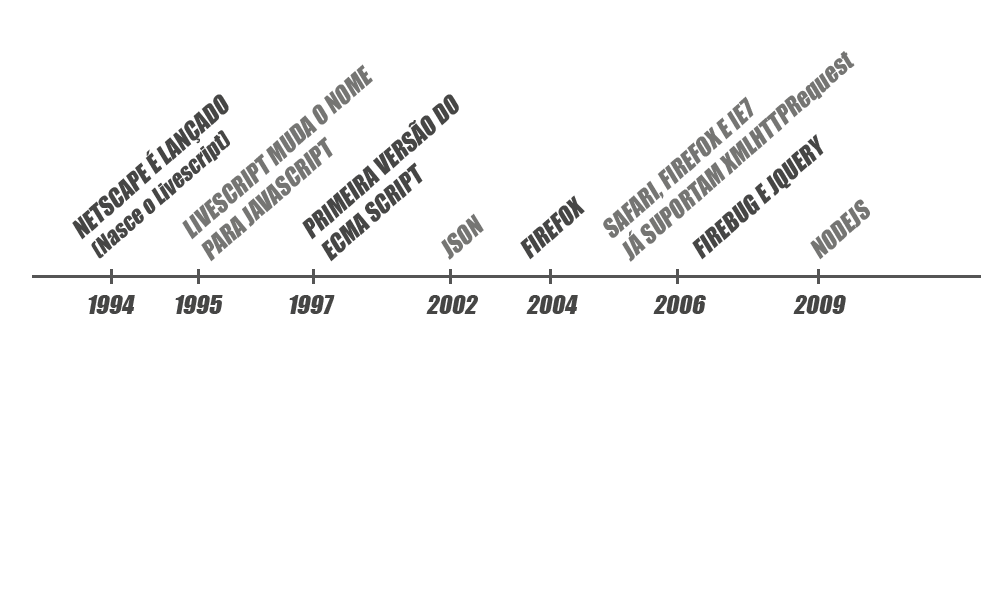
<style>
.page{position:relative;width:1000px;height:600px;background:#ffffff}
.page>*{position:absolute;margin:0}
.t1{font:24px "Impact";color:#757573;text-transform:uppercase;font-style:italic}
.t2{font:24px "Impact";color:#757573;font-style:italic}
.t3{font:22px "Impact";color:#464645;font-style:italic}
.t4{font:24px "Impact";color:#464645;text-transform:uppercase;font-style:italic}
</style>
<div class="page">
<p class="t1" style="left:603px;top:51px;width:252px;height:211px;rotate:-41deg">Safari, firefox e ie7<br>já suportam xmlhttpr<span class="t2">equest</span></p>
<p class="t1" style="left:182px;top:64px;width:191px;height:198px;rotate:-41deg">Livescript muda o nome<br>para javascript</p>
<p class="t3" style="left:72px;top:94px;width:158px;height:165px;rotate:-41deg"><span class="t4">Netscape é lançado</span><br>(Nasce o Livescript)</p>
<p class="t4" style="left:302px;top:94px;width:157px;height:168px;rotate:-41deg">primeira versão do<br>ecma script</p>
<p class="t4" style="left:692px;top:134px;width:132px;height:126px;rotate:-41deg">Firebug e jQuery</p>
<p class="t4" style="left:520px;top:195px;width:65px;height:65px;rotate:-41deg">Firefox</p>
<p class="t1" style="left:810px;top:199px;width:60px;height:61px;rotate:-41deg">nodejs</p>
<p class="t1" style="left:441px;top:213px;width:43px;height:47px;rotate:-41deg">JSOn</p>
<p class="t4" style="left:88px;top:295px;width:47px;height:19px">1994</p>
<p class="t4" style="left:175px;top:295px;width:48px;height:19px">1995</p>
<p class="t4" style="left:289px;top:295px;width:46px;height:19px">1997</p>
<p class="t4" style="left:426px;top:295px;width:52px;height:19px">2002</p>
<p class="t4" style="left:526px;top:295px;width:52px;height:19px">2004</p>
<p class="t4" style="left:653px;top:295px;width:53px;height:19px">2006</p>
<p class="t4" style="left:793px;top:295px;width:53px;height:19px">2009</p>
</div>
